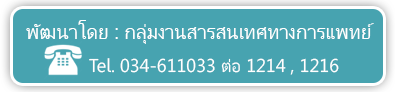
<style>
.page{position:relative;width:395px;height:92px;background:#47a3b0}
.page>*{position:absolute;margin:0}
.t1{font:20.7px "Leelawadee";color:#ffffff}
.t2{font:18.4px "Leelawadee";color:#ffffff}
</style>
<div class="page">
<p class="t1" style="left:26px;top:20px;width:348px;height:24px">พัฒนาโดย : กลุ่มงานสารสนเทศทางการแพทย์</p>
<p class="t2" style="left:89px;top:58px;width:250px;height:17px">Tel. 034-611033 ต่อ 1214 , 1216</p>
</div>
